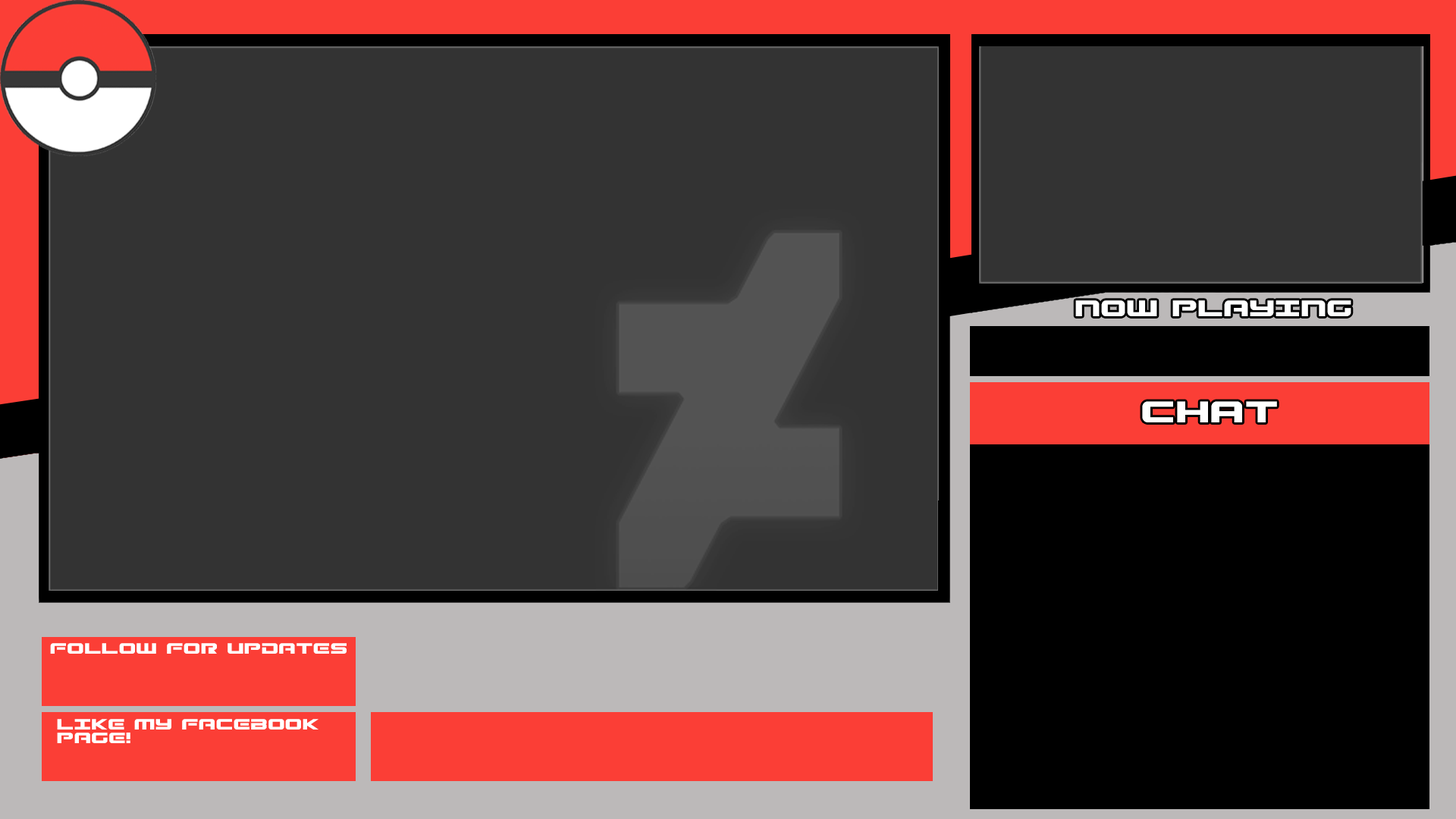
<style>
.page{position:relative;width:1456px;height:819px;background:#333333}
.page>*{position:absolute;margin:0}
.t1{font:27.3px "Gunship";color:#ffffff}
.t2{font:36.4px "Gunship";color:#ffffff}
.t3{font:18.2px "Gunship";color:#ffffff}
.t4{font:18.2px/13.6px "Gunship";color:#ffffff}
</style>
<div class="page">
<p class="t1" style="left:1075px;top:300px;width:276px;height:16px">NOW PLAYING</p>
<p class="t2" style="left:1142px;top:401px;width:135px;height:21px">chat</p>
<p class="t3" style="left:50px;top:643px;width:297px;height:11px">FOLLOW FOR UPDATES</p>
<p class="t4" style="left:57px;top:719px;width:261px;height:24px">LIKE MY FACEBOOK <br>PAGE!</p>
</div>
